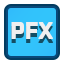
<style>
.page{position:relative;width:64px;height:64px;background:#ffffff}
.page>*{position:absolute;margin:0}
.t1{font:23.6px "Oxanium-ExtraBold";letter-spacing:-0.02em;color:#efefef}
</style>
<div class="page">
<p class="t1" style="left:11px;top:22px;width:42px;height:17px">PFX</p>
</div>
